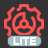
<style>
.page{position:relative;width:48px;height:48px;background:#333333}
.page>*{position:absolute;margin:0}
.t1{font:11px "A030-Bol";color:#ffffff}
</style>
<div class="page">
<p class="t1" style="left:13px;top:37px;width:24px;height:8px">LITE</p>
</div>
